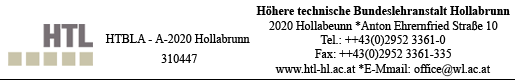
<style>
.page{position:relative;width:515px;height:80px;background:#ffffff}
.page>*{position:absolute;margin:0}
.t1{font:12px "TimesNewRomanPSMT";color:#000000}
.t2{font:12px "TimesNewRomanPS-BoldMT";color:#000000}
</style>
<div class="page">
<p class="t1" style="left:256px;top:6px;width:254px;height:71px;text-align:center"><span class="t2">Höhere technische Bundeslehranstalt Hollabrunn<br></span>2020 Hollabeunn *Anton Ehrernfried Straße 10<br>Tel.: ++43(0)2952 3361-0<br>Fax: ++43(0)2952 3361-335<br>www.htl-hl.ac.at *E-Mmail: office@wl.ac.at</p>
<p class="t1" style="left:105px;top:34px;width:145px;height:9px">HTBLA - A-2020 Hollabrunn</p>
<p class="t1" style="left:161px;top:54px;width:36px;height:9px">310447</p>
</div>
